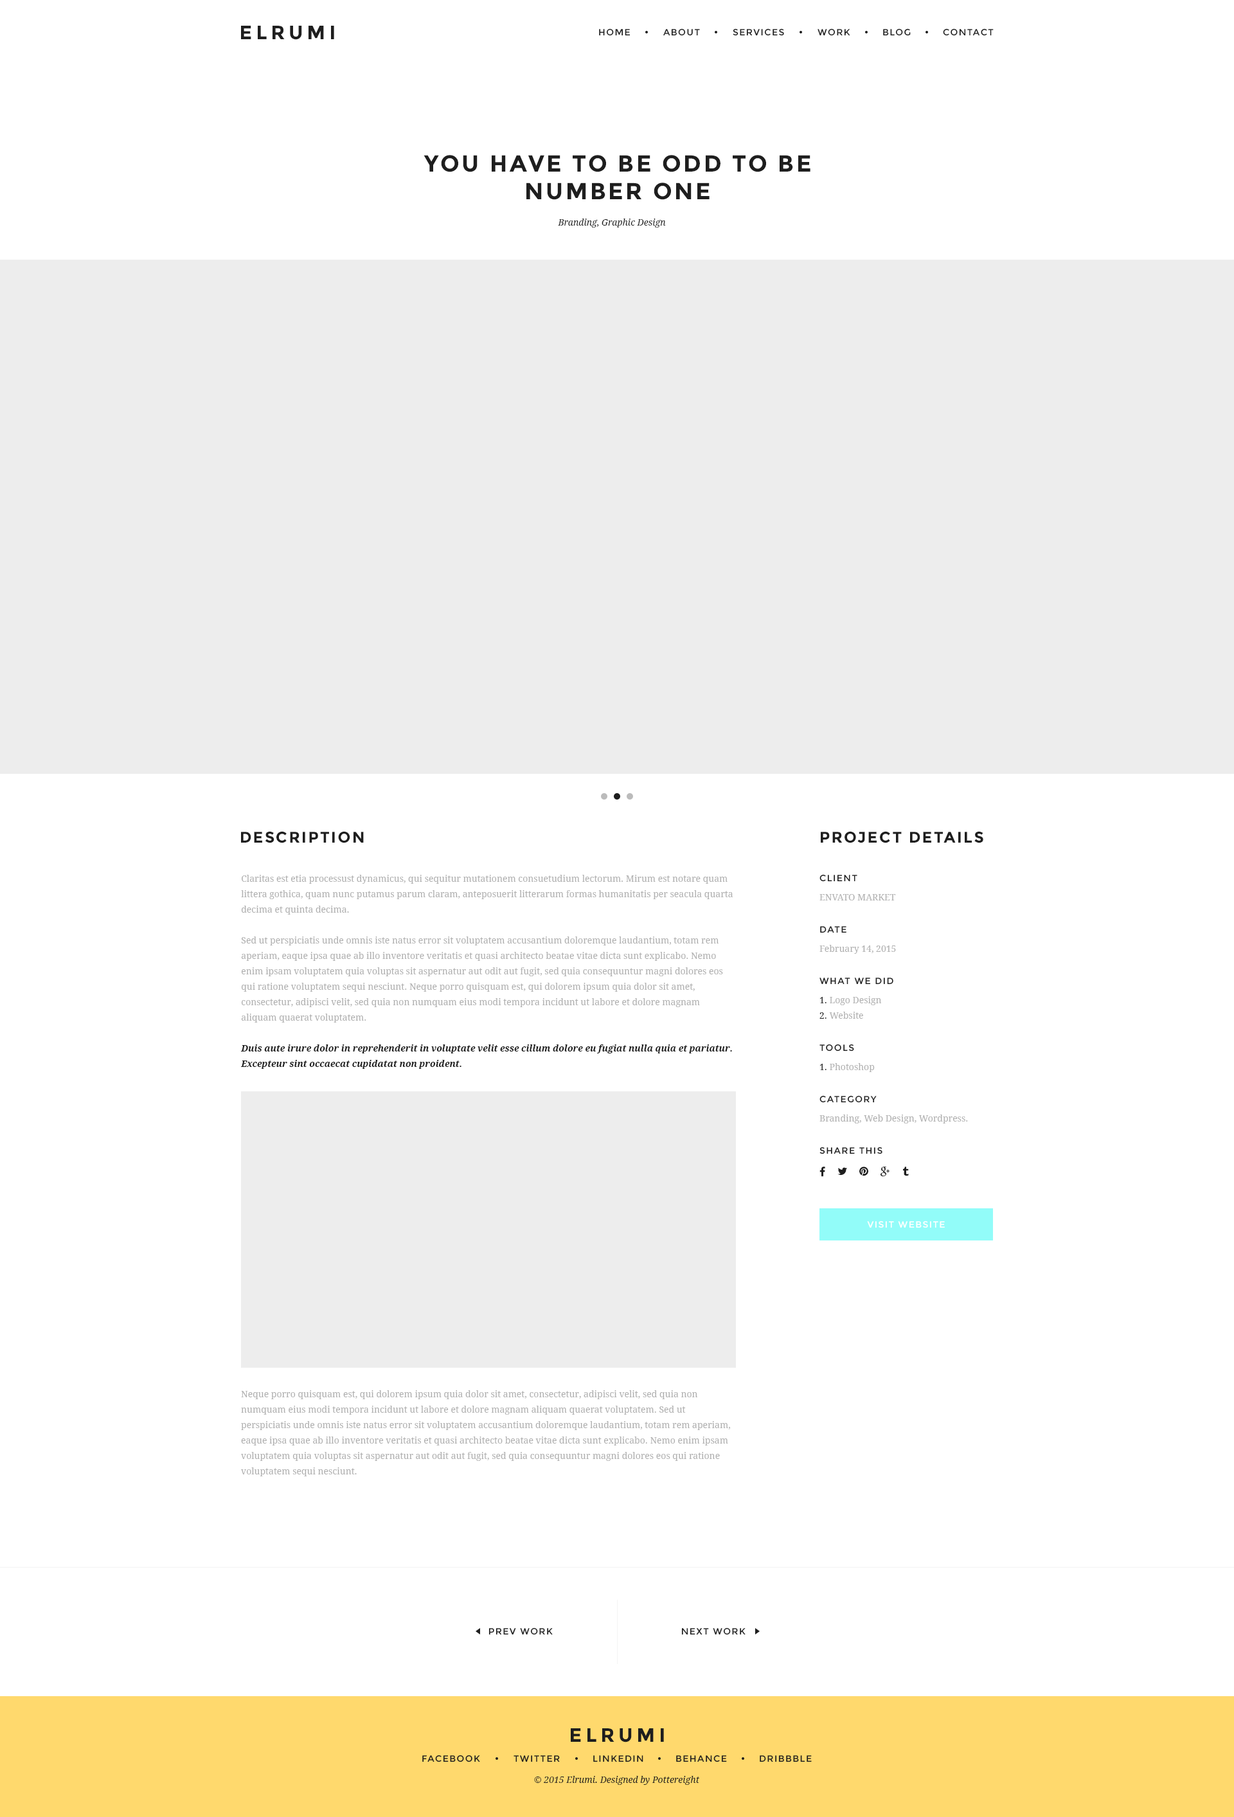
<style>
.page{position:relative;width:1234px;height:1817px;background:#ffffff}
.page>*{position:absolute;margin:0}
.t1{font:19.3px "Montserrat-Bold";letter-spacing:0.2em;color:#1e1e1e}
.t2{font:9px "Montserrat-Regular";letter-spacing:0.1em;color:#1e1e1e}
.t3{font:23.1px "Montserrat-Bold";letter-spacing:0.1em;color:#1e1e1e}
.t4{font:9px "DroidSerif-Italic";color:#1e1e1e}
.t5{font:15.4px "Montserrat-Bold";letter-spacing:0.1em;color:#1e1e1e}
.t6{font:9px/15.4px "DroidSerif";color:#afafaf}
.t7{font:9px/15.4px "DroidSerif-BoldItalic";color:#1e1e1e}
.t8{font:9px "DroidSerif";color:#afafaf}
.t9{font:9px/15.4px "DroidSerif";color:#1e1e1e}
.t10{font:9px "DroidSerif";color:#1e1e1e}
.t11{font:9px "Montserrat-Regular";letter-spacing:0.1em;color:#ffffff}
</style>
<div class="page">
<p class="t1" style="left:241px;top:26px;width:93px;height:14px">ELRUMI</p>
<p class="t2" style="left:599px;top:28px;width:32px;height:8px">HOME</p>
<p class="t2" style="left:663px;top:28px;width:37px;height:8px">ABOUT</p>
<p class="t2" style="left:733px;top:28px;width:51px;height:8px">SERVICES</p>
<p class="t2" style="left:818px;top:28px;width:33px;height:8px">WORK</p>
<p class="t2" style="left:883px;top:28px;width:28px;height:8px">BLOG</p>
<p class="t2" style="left:943px;top:28px;width:51px;height:8px">CONTACT</p>
<p class="t3" style="left:424px;top:155px;width:387px;height:45px;text-align:center">YOU HAVE TO BE ODD TO BE<br>NUMBER ONE</p>
<p class="t4" style="left:558px;top:219px;width:108px;height:9px">Branding, Graphic Design</p>
<p class="t5" style="left:241px;top:831px;width:123px;height:12px">DESCRIPTION</p>
<p class="t5" style="left:821px;top:831px;width:163px;height:12px">PROJECT DETAILS</p>
<p class="t6" style="left:240px;top:875px;width:493px;height:194px">Claritas est etia processust dynamicus, qui sequitur mutationem consuetudium lectorum. Mirum est notare quam littera gothica, quam nunc putamus parum claram, anteposuerit litterarum formas humanitatis per seacula quarta decima et quinta decima. <br><br>Sed ut perspiciatis unde omnis iste natus error sit voluptatem accusantium doloremque laudantium, totam rem aperiam, eaque ipsa quae ab illo inventore veritatis et quasi architecto beatae vitae dicta sunt explicabo. Nemo enim ipsam voluptatem quia voluptas sit aspernatur aut odit aut fugit, sed quia consequuntur magni dolores eos qui ratione voluptatem sequi nesciunt. Neque porro quisquam est, qui dolorem ipsum quia dolor sit amet, consectetur, adipisci velit, sed quia non numquam eius modi tempora incidunt ut labore et dolore magnam aliquam quaerat voluptatem.<br><br><span class="t7">Duis aute irure dolor in reprehenderit in voluptate velit esse cillum dolore eu fugiat nulla quia et pariatur. Excepteur sint occaecat cupidatat non proident.</span></p>
<p class="t2" style="left:820px;top:874px;width:38px;height:8px">CLIENT</p>
<p class="t8" style="left:820px;top:894px;width:76px;height:7px">ENVATO MARKET</p>
<p class="t2" style="left:820px;top:926px;width:27px;height:7px">DATE</p>
<p class="t8" style="left:820px;top:945px;width:76px;height:9px">February 14, 2015</p>
<p class="t2" style="left:820px;top:978px;width:74px;height:7px">WHAT WE DID</p>
<p class="t6" style="left:820px;top:996px;width:62px;height:23px"><span class="t9">1.</span> Logo Design<br><span class="t9">2.</span> Website</p>
<p class="t2" style="left:820px;top:1044px;width:34px;height:8px">TOOLS</p>
<p class="t8" style="left:820px;top:1063px;width:55px;height:9px"><span class="t10">1.</span> Photoshop</p>
<p class="t2" style="left:820px;top:1095px;width:57px;height:8px">CATEGORY</p>
<p class="t8" style="left:820px;top:1115px;width:148px;height:9px">Branding, Web Design, Wordpress.</p>
<p class="t2" style="left:820px;top:1147px;width:63px;height:8px">SHARE THIS</p>
<p class="t11" style="left:867px;top:1221px;width:78px;height:7px">VISIT WEBSITE</p>
<p class="t6" style="left:241px;top:1390px;width:489px;height:87px">Neque porro quisquam est, qui dolorem ipsum quia dolor sit amet, consectetur, adipisci velit, sed quia non numquam eius modi tempora incidunt ut labore et dolore magnam aliquam quaerat voluptatem. Sed ut perspiciatis unde omnis iste natus error sit voluptatem accusantium doloremque laudantium, totam rem aperiam, eaque ipsa quae ab illo inventore veritatis et quasi architecto beatae vitae dicta sunt explicabo. Nemo enim ipsam voluptatem quia voluptas sit aspernatur aut odit aut fugit, sed quia consequuntur magni dolores eos qui ratione voluptatem sequi nesciunt.</p>
<p class="t2" style="left:489px;top:1628px;width:64px;height:7px">PREV WORK</p>
<p class="t2" style="left:681px;top:1628px;width:65px;height:7px">NEXT WORK</p>
<p class="t1" style="left:571px;top:1729px;width:93px;height:14px">ELRUMI</p>
<p class="t2" style="left:422px;top:1755px;width:58px;height:8px">FACEBOOK</p>
<p class="t2" style="left:514px;top:1756px;width:46px;height:7px">TWITTER</p>
<p class="t2" style="left:593px;top:1756px;width:51px;height:7px">LINKEDIN</p>
<p class="t2" style="left:676px;top:1755px;width:51px;height:8px">BEHANCE</p>
<p class="t2" style="left:760px;top:1756px;width:52px;height:7px">DRIBBBLE</p>
<p class="t4" style="left:534px;top:1776px;width:165px;height:9px">© 2015 Elrumi. Designed by Pottereight</p>
</div>
